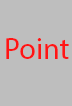
<style>
.page{position:relative;width:72px;height:106px;background:#bebebe}
.page>*{position:absolute;margin:0}
.t1{font:30px "MyriadPro-Regular";color:#ff1515}
</style>
<div class="page">
<p class="t1" style="left:6px;top:38px;width:63px;height:21px">Point</p>
</div>
